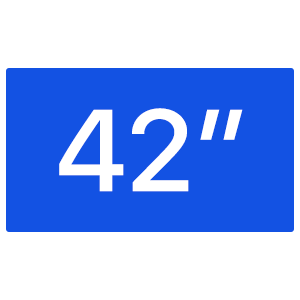
<style>
.page{position:relative;width:300px;height:300px;background:#ffffff}
.page>*{position:absolute;margin:0}
.t1{font:115px "SFUIDisplay-Medium";color:#ffffff}
</style>
<div class="page">
<p class="t1" style="left:59px;top:108px;width:184px;height:84px">42”</p>
</div>
